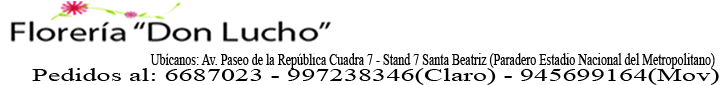
<style>
.page{position:relative;width:720px;height:85px;background:#ffffff}
.page>*{position:absolute;margin:0}
.t1{font:17px "TimesNewRomanPSMT";color:#000000;scale:0.71 1}
.t2{font:18px "TimesNewRomanPSMT";color:#000000;scale:1.57 1}
</style>
<div class="page">
<p class="t1" style="left:150px;top:53px;width:565px;height:16px">Ubícanos: Av. Paseo de la República Cuadra 7 - Stand 7 Santa Beatriz (Paradero Estadio Nacional del Metropolitano)</p>
<p class="t2" style="left:32px;top:68px;width:687px;height:17px">Pedidos al: 6687023 - 997238346(Claro) - 945699164(Mov)</p>
</div>
